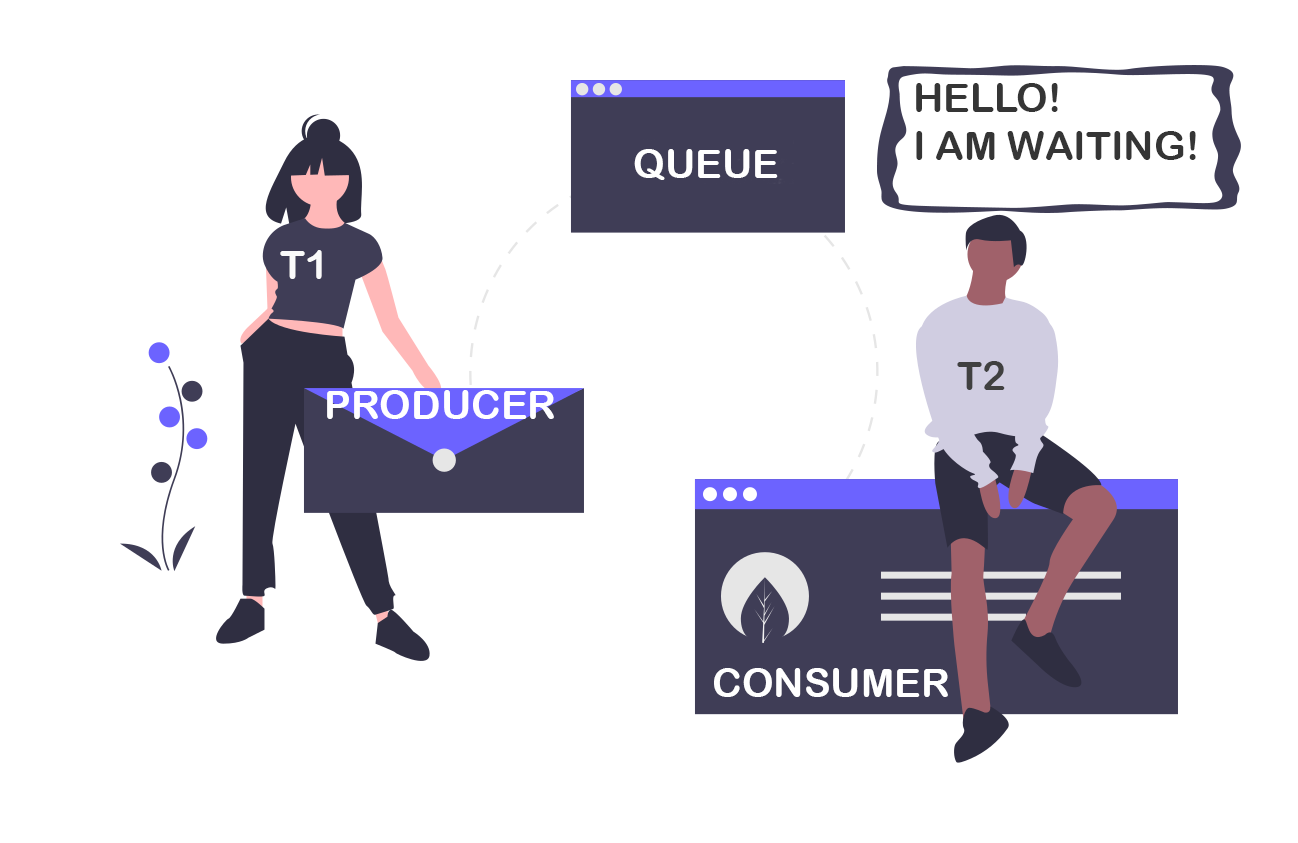
<style>
.page{position:relative;width:1298px;height:843px;background:#ffffff}
.page>*{position:absolute;margin:0}
.t1{font:40px "ArialRoundedMTBold";color:#353535}
.t2{font:40px "ArialRoundedMTBold";color:#ffffff}
.t3{font:40px "ArialRoundedMTBold";color:#fafafa}
.t4{font:40px "ArialRoundedMTBold";color:#404040}
</style>
<div class="page">
<p class="t1" style="left:916px;top:83px;width:280px;height:77px">HELLO!<br>I AM WAITING!</p>
<p class="t2" style="left:634px;top:149px;width:144px;height:31px">QUEUE</p>
<p class="t3" style="left:280px;top:250px;width:42px;height:29px">T1</p>
<p class="t4" style="left:957px;top:361px;width:48px;height:29px">T2</p>
<p class="t2" style="left:327px;top:390px;width:227px;height:29px">PRODUCER</p>
<p class="t2" style="left:714px;top:668px;width:234px;height:29px">CONSUMER</p>
</div>
